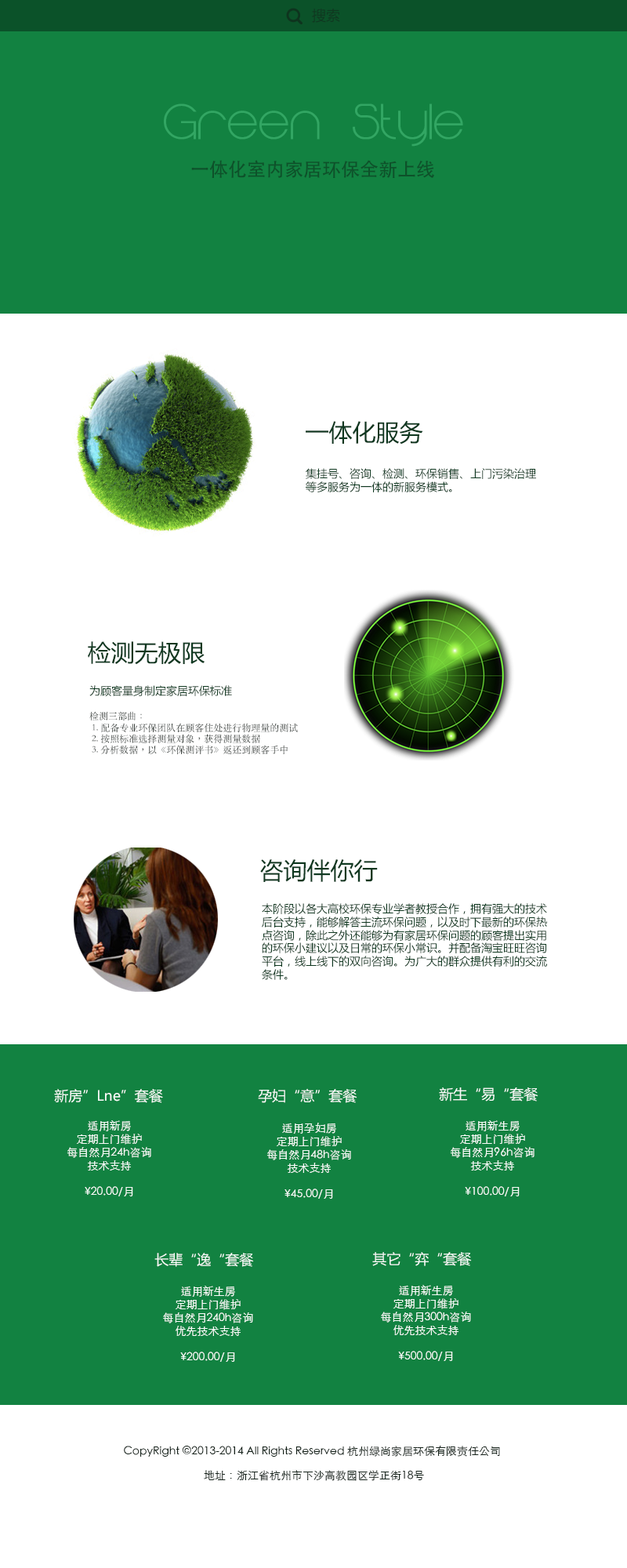
<style>
.page{position:relative;width:627px;height:1568px;background:#ffffff}
.page>*{position:absolute;margin:0}
.t1{font:18.8px "iconfont";color:#0e341e}
.t2{font:14.1px "MicrosoftYaHei";color:#0f3820}
.t3{font:47px "MajoramSans-Bold";color:#32a663}
.t4{font:18.8px "AdobeHeitiStd-Regular";color:#0e512a}
.t5{font:23.5px "MicrosoftYaHei";color:#0f3820}
.t6{font:11px "MicrosoftYaHei";color:#0f3820}
.t7{font:9.4px "STSongti-TC-Regular";color:#303733}
.t8{font:14.1px "MicrosoftYaHei";color:#f8fdfa}
.t9{font:11px "STHeitiTC-Light";color:#f8fdfa}
.t10{font:11px "STHeitiTC-Light";color:#15221a}
</style>
<div class="page">
<p class="t1" style="left:286px;top:8px;width:17px;height:17px">󰄬</p>
<p class="t2" style="left:312px;top:9px;width:28px;height:14px">搜索</p>
<p class="t3" style="left:164px;top:103px;width:299px;height:44px">Green Style</p>
<p class="t4" style="left:191px;top:160px;width:243px;height:18px">一体化室内家居环保全新上线</p>
<p class="t5" style="left:306px;top:420px;width:117px;height:25px">一体化服务</p>
<p class="t6" style="left:306px;top:468px;width:230px;height:24px">集挂号、咨询、检测、环保销售、上门污染治理<br>等多服务为一体的新服务模式。</p>
<p class="t5" style="left:88px;top:641px;width:117px;height:24px">检测无极限</p>
<p class="t7" style="left:89px;top:685px;width:209px;height:69px"><span class="t6">为顾客量身制定家居环保标准<br><br></span>检测三部曲：<br> 1. 配备专业环保团队在顾客住处进行物理量的测试<br> 2. 按照标准选择测量对象，获得测量数据<br> 3. 分析数据，以《环保测评书》返还到顾客手中</p>
<p class="t5" style="left:260px;top:859px;width:118px;height:23px">咨询伴你行</p>
<p class="t6" style="left:262px;top:903px;width:285px;height:77px">本阶段以各大高校环保专业学者教授合作，拥有强大的技术<br>后台支持，能够解答主流环保问题，以及时下最新的环保热<br>点咨询，除此之外还能够为有家居环保问题的顾客提出实用<br>的环保小建议以及日常的环保小常识。并配备淘宝旺旺咨询<br>平台，线上线下的双向咨询。为广大的群众提供有利的交流<br>条件。</p>
<p class="t8" style="left:54px;top:1089px;width:109px;height:14px">新房”Lne”套餐</p>
<p class="t8" style="left:258px;top:1088px;width:100px;height:15px">孕妇“意”套餐</p>
<p class="t8" style="left:439px;top:1087px;width:100px;height:15px">新生“易“套餐</p>
<p class="t9" style="left:67px;top:1120px;width:84px;height:76px;text-align:center">适用新房<br>定期上门维护<br>每自然月24h咨询<br>技术支持<br><br>¥20.00/月</p>
<p class="t9" style="left:450px;top:1120px;width:85px;height:76px;text-align:center">适用新生房<br>定期上门维护<br>每自然月96h咨询<br>技术支持<br><br>¥100.00/月</p>
<p class="t9" style="left:267px;top:1123px;width:84px;height:76px;text-align:center">适用孕妇房<br>定期上门维护<br>每自然月48h咨询<br>技术支持<br><br>¥45.00/月</p>
<p class="t8" style="left:154px;top:1253px;width:100px;height:14px">长辈“逸“套餐</p>
<p class="t8" style="left:372px;top:1252px;width:100px;height:14px">其它“弈“套餐</p>
<p class="t9" style="left:163px;top:1286px;width:90px;height:76px;text-align:center">适用新生房<br>定期上门维护<br>每自然月240h咨询<br>优先技术支持<br><br>¥200.00/月</p>
<p class="t9" style="left:381px;top:1285px;width:90px;height:76px;text-align:center">适用新生房<br>定期上门维护<br>每自然月300h咨询<br>优先技术支持<br><br>¥500.00/月</p>
<p class="t10" style="left:124px;top:1446px;width:376px;height:11px">CopyRight ©2013-2014 All Rights Reserved 杭州绿尚家居环保有限责任公司</p>
<p class="t10" style="left:204px;top:1470px;width:220px;height:11px">地址：浙江省杭州市下沙高教园区学正街18号</p>
</div>
